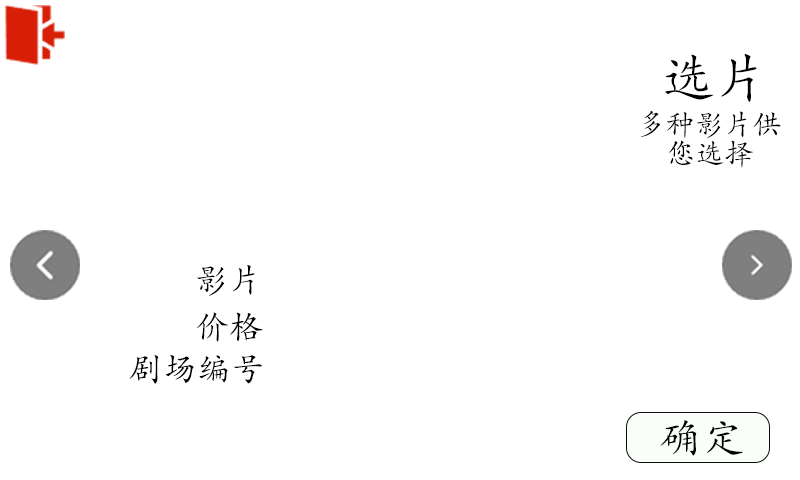
<style>
.page{position:relative;width:800px;height:480px;background:#ffffff}
.page>*{position:absolute;margin:0}
.t1{font:54.4px "STKaiti";color:#000000}
.t2{font:29.2px/29.2px "STKaiti";color:#000000}
.t3{font:34px "STKaiti";color:#000000}
.t4{font:41.7px "STKaiti";color:#000000}
</style>
<div class="page">
<p class="t1" style="left:665px;top:54px;width:92px;height:48px">选片</p>
<p class="t2" style="left:641px;top:110px;width:140px;height:58px;text-align:center">多种影片供<br>您选择</p>
<p class="t3" style="left:197px;top:265px;width:58px;height:31px">影片</p>
<p class="t3" style="left:196px;top:312px;width:67px;height:30px">价格</p>
<p class="t3" style="left:129px;top:355px;width:133px;height:29px">剧场编号</p>
<p class="t4" style="left:660px;top:420px;width:83px;height:36px">确定</p>
</div>
